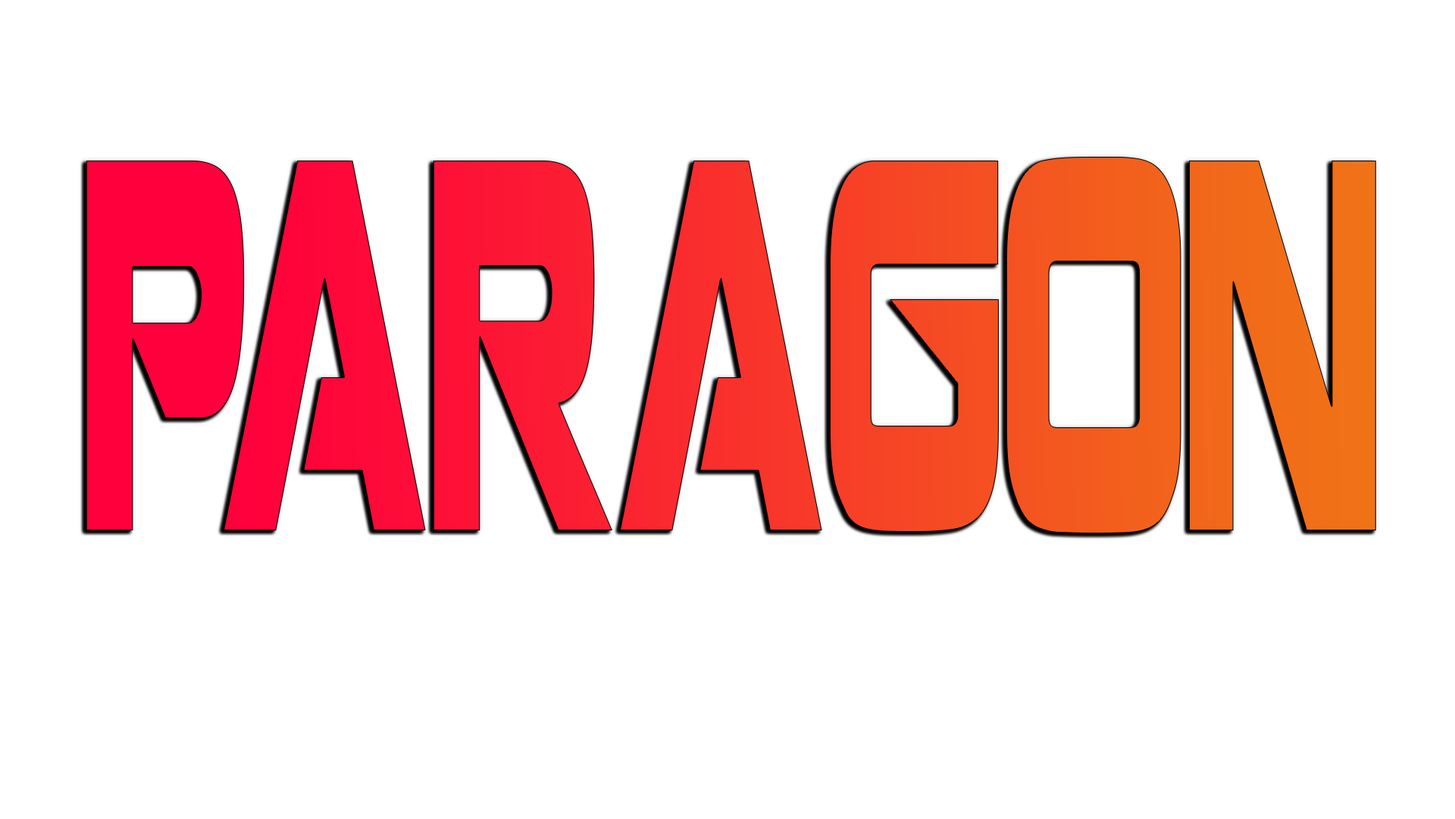
<style>
.page{position:relative;width:1455px;height:819px;background:#ffffff}
.page>*{position:absolute;margin:0}
.t1{font:522.9px "Coalition";scale:0.36 1}
</style>
<div class="page">
<p class="t1" style="left:86px;top:157px;width:1290px;height:377px">paragon</p>
</div>
